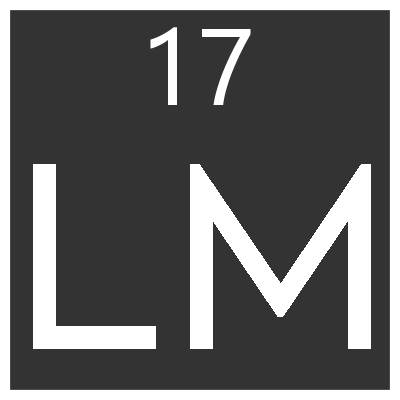
<style>
.page{position:relative;width:400px;height:400px;background:#333333}
.page>*{position:absolute;margin:0}
.t1{font:108.3px "SegoeUIHistoric";color:#ffffff}
.t2{font:250px "Axiforma-Book";color:#ffffff}
</style>
<div class="page">
<p class="t1" style="left:150px;top:27px;width:101px;height:78px">17</p>
<p class="t2" style="left:33px;top:164px;width:123px;height:185px">L</p>
<p class="t2" style="left:190px;top:164px;width:181px;height:185px">M</p>
</div>
